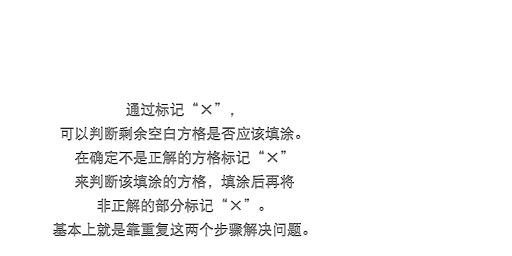
<style>
.page{position:relative;width:512px;height:256px;background:#ffffff}
.page>*{position:absolute;margin:0}
.t1{font:14.7px/24px "DFPHeiW5-GB"}
</style>
<div class="page">
<p class="t1" style="left:53px;top:102px;width:255px;height:135px;text-align:center">通过标记“×”，<br>可以判断剩余空白方格是否应该填涂。<br>在确定不是正解的方格标记“×”<br>来判断该填涂的方格，填涂后再将<br>非正解的部分标记“×”。<br>基本上就是靠重复这两个步骤解决问题。</p>
</div>
